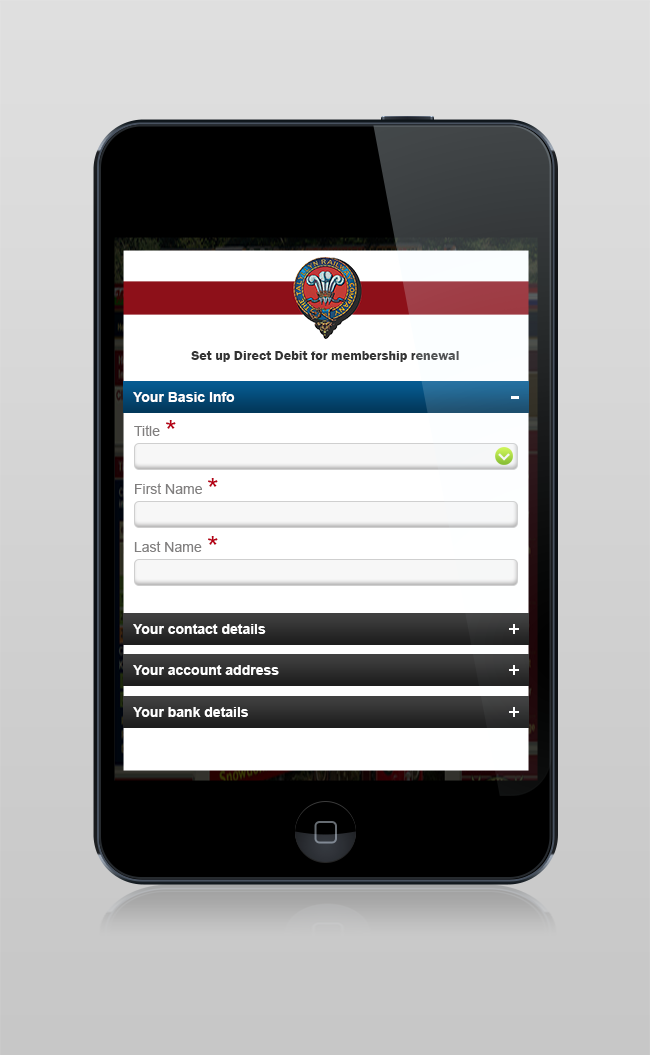
<style>
.page{position:relative;width:650px;height:1055px}
.page>*{position:absolute;margin:0}
.t1{font:14px "FranklinGothic-Demi";color:#333333}
.t2{font:14px "Arial-BoldMT";color:#ffffff}
.t3{font:14px "ArialMT";color:#817f7f}
.t4{font:30px "ArialMT";color:#b60015}
.t5{font:18px "ArialMT";color:#ffffff}
</style>
<div class="page">
<p class="t1" style="left:191px;top:351px;width:268px;height:11px">Set up Direct Debit for membership renewal</p>
<p class="t2" style="left:133px;top:392px;width:102px;height:10px">Your Basic Info</p>
<p class="t3" style="left:134px;top:425px;width:26px;height:11px">Title</p>
<p class="t4" style="left:166px;top:420px;width:10px;height:9px">*</p>
<p class="t3" style="left:135px;top:483px;width:67px;height:11px">First Name</p>
<p class="t4" style="left:208px;top:478px;width:10px;height:9px">*</p>
<p class="t3" style="left:134px;top:541px;width:68px;height:11px">Last Name</p>
<p class="t4" style="left:208px;top:536px;width:10px;height:9px">*</p>
<p class="t2" style="left:133px;top:624px;width:133px;height:10px">Your contact details</p>
<p class="t5" style="left:509px;top:624px;width:10px;height:10px">+</p>
<p class="t2" style="left:133px;top:665px;width:146px;height:10px">Your account address</p>
<p class="t5" style="left:509px;top:665px;width:10px;height:10px">+</p>
<p class="t2" style="left:133px;top:707px;width:115px;height:10px">Your bank details</p>
<p class="t5" style="left:509px;top:707px;width:10px;height:10px">+</p>
</div>
